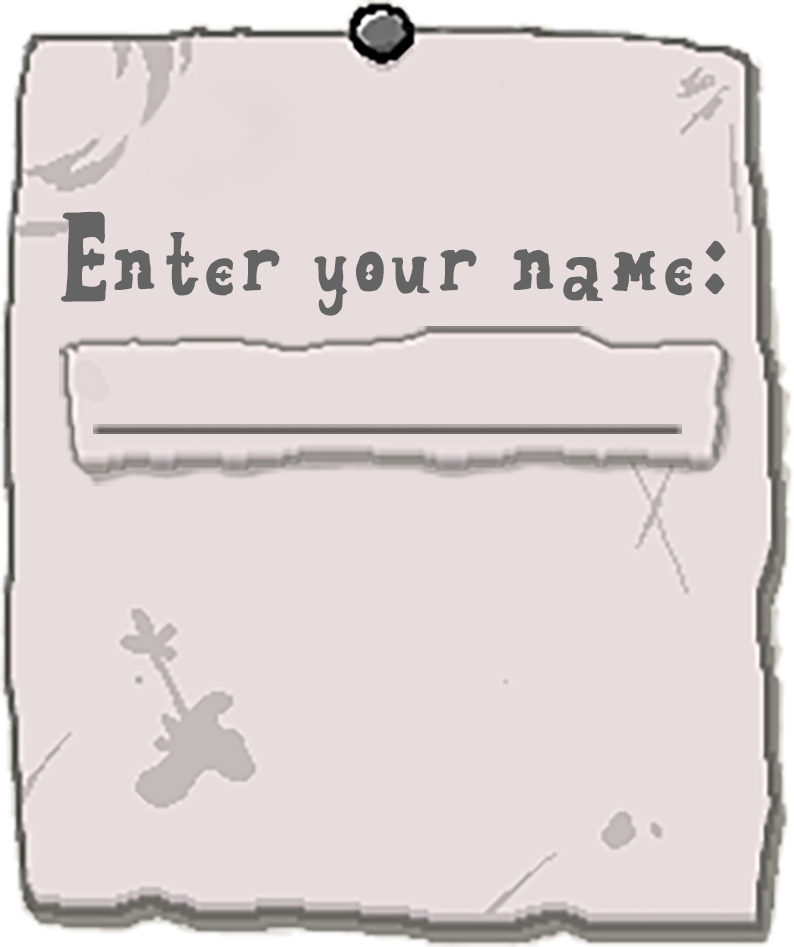
<style>
.page{position:relative;width:794px;height:947px;background:#e7dddc}
.page>*{position:absolute;margin:0}
.t1{font:73.7px "Cordelia-Regular";color:#646464}
</style>
<div class="page">
<p class="t1" style="left:60px;top:211px;width:666px;height:105px">Enter your name:</p>
</div>
